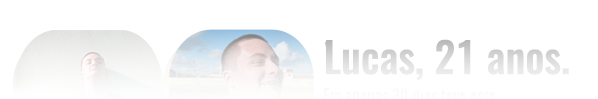
<style>
.page{position:relative;width:598px;height:99px;background:#ffffff}
.page>*{position:absolute;margin:0}
.t1{font:42px "Oswald-Medium";color:#dddddd}
</style>
<div class="page">
<p class="t1" style="left:326px;top:39px;width:243px;height:41px">Lucas, 21 anos.</p>
</div>
